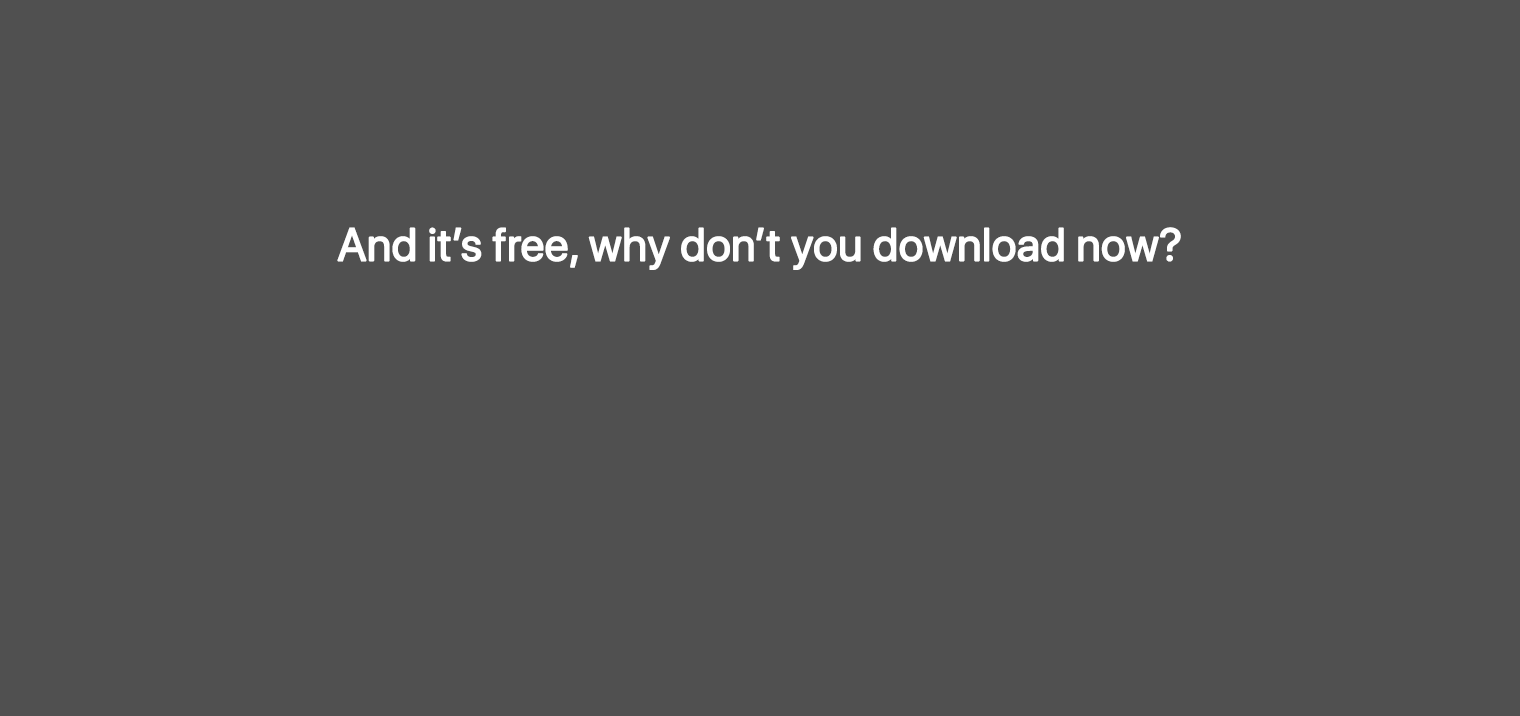
<style>
.page{position:relative;width:1520px;height:716px;background:#505050}
.page>*{position:absolute;margin:0}
.t1{font:45.8px "SFProDisplay-Regular";color:#ffffff;font-weight:bold}
</style>
<div class="page">
<p class="t1" style="left:337px;top:227px;width:844px;height:43px">And it’s free, why don’t you download now?</p>
</div>
